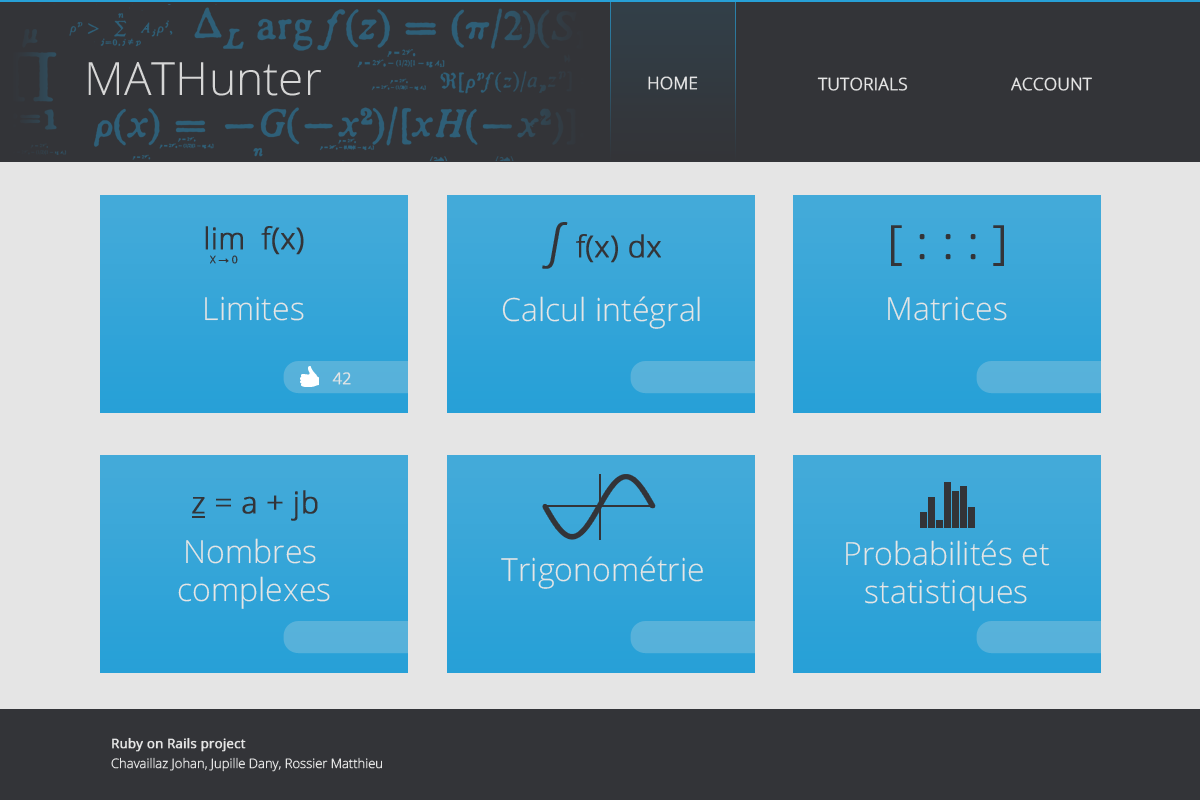
<style>
.page{position:relative;width:1200px;height:800px;background:#333438}
.page>*{position:absolute;margin:0}
.t1{font:46px "OpenSans-Light";color:#d6d6d6}
.t2{font:17px "OpenSans-Light";color:#e5e5e5;text-transform:uppercase;font-weight:bold}
.t3{font:30px "OpenSans-Light";color:#333438;font-weight:bold}
.t4{font:46px "OpenSans-Light";color:#333438;font-weight:bold;font-style:italic}
.t5{font:46px "OpenSans-Light";color:#333438;font-weight:bold}
.t6{font:10px "OpenSans-Light";color:#333438;font-weight:bold}
.t7{font:10px "ArialMT";color:#333438;font-weight:bold}
.t8{font:32px "OpenSans-Light";color:#e5e5e5}
.t9{font:16px "OpenSans-Light";color:#e5e5e5;font-weight:bold}
.t10{font:13px/20px "OpenSans-Light";color:#e5e5e5}
.t11{font:13px/20px "OpenSans";color:#e5e5e5;font-weight:bold}
</style>
<div class="page">
<p class="t1" style="left:88px;top:62px;width:233px;height:34px">MATHunter</p>
<p class="t2" style="left:648px;top:76px;width:50px;height:14px">Home</p>
<p class="t2" style="left:817px;top:77px;width:91px;height:14px">Tutorials</p>
<p class="t2" style="left:1011px;top:77px;width:81px;height:14px">Account</p>
<p class="t3" style="left:542px;top:222px;width:119px;height:47px"><span class="t4">∫ </span>f(x) dx</p>
<p class="t3" style="left:205px;top:226px;width:38px;height:24px">lim</p>
<p class="t3" style="left:261px;top:226px;width:43px;height:29px">f(x)</p>
<p class="t5" style="left:891px;top:225px;width:113px;height:41px">[ : : : ]</p>
<p class="t6" style="left:210px;top:255px;width:28px;height:9px">X <span class="t7">→ </span>0</p>
<p class="t8" style="left:205px;top:296px;width:99px;height:25px">Limites</p>
<p class="t8" style="left:502px;top:296px;width:198px;height:33px">Calcul intégral</p>
<p class="t8" style="left:888px;top:296px;width:119px;height:25px">Matrices</p>
<p class="t9" style="left:332px;top:372px;width:19px;height:13px">42</p>
<p class="t3" style="left:192px;top:490px;width:126px;height:31px">z = a + jb</p>
<p class="t8" style="left:178px;top:538px;width:152px;height:71px;text-align:center">Nombres <br>complexes</p>
<p class="t8" style="left:846px;top:540px;width:204px;height:71px;text-align:center">Probabilités et<br>statistiques</p>
<p class="t8" style="left:501px;top:556px;width:202px;height:33px">Trigonométrie</p>
<p class="t10" style="left:111px;top:737px;width:271px;height:35px"><span class="t11">Ruby on Rails project<br></span>Chavaillaz Johan, Jupille Dany, Rossier Matthieu</p>
</div>
